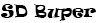
<style>
.page{position:relative;width:97px;height:23px;background:#ffffff}
.page>*{position:absolute;margin:0}
.t1{font:16px "Ravie";color:#000000}
</style>
<div class="page">
<p class="t1" style="left:1px;top:4px;width:95px;height:17px">SD Buper</p>
</div>
